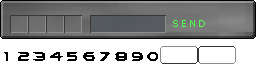
<style>
.page{position:relative;width:256px;height:64px;background:#ffffff}
.page>*{position:absolute;margin:0}
.t1{font:10px "Verdana";letter-spacing:0.18em;color:#4eff4e}
.t2{font:12px "Ethnocentric";letter-spacing:0.18em;color:#000000}
</style>
<div class="page">
<p class="t1" style="left:173px;top:20px;width:32px;height:7px">SEND</p>
<p class="t2" style="left:4px;top:52px;width:154px;height:9px">1 2 3 4 5 6 7 8 9 0</p>
</div>
